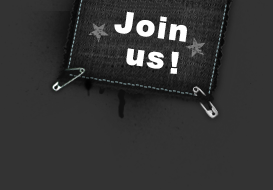
<style>
.page{position:relative;width:273px;height:190px;background:#333333}
.page>*{position:absolute;margin:0}
.t1{font:30px "Arial-Black";letter-spacing:0.05em;color:#ffffff}
</style>
<div class="page">
<p class="t1" style="left:114px;top:11px;width:73px;height:31px;rotate:8deg">Join</p>
<p class="t1" style="left:126px;top:48px;width:38px;height:21px;rotate:8deg">us</p>
<p class="t1" style="left:170px;top:51px;width:9px;height:23px;rotate:5deg">!</p>
</div>
